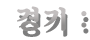
<style>
.page{position:relative;width:90px;height:40px;background:#ffffff}
.page>*{position:absolute;margin:0}
.t1{font:26.9px "SDKukdetopokki-bBd";letter-spacing:0.08em}
</style>
<div class="page">
<p class="t1" style="left:17px;top:6px;width:70px;height:25px">경기 :</p>
</div>
